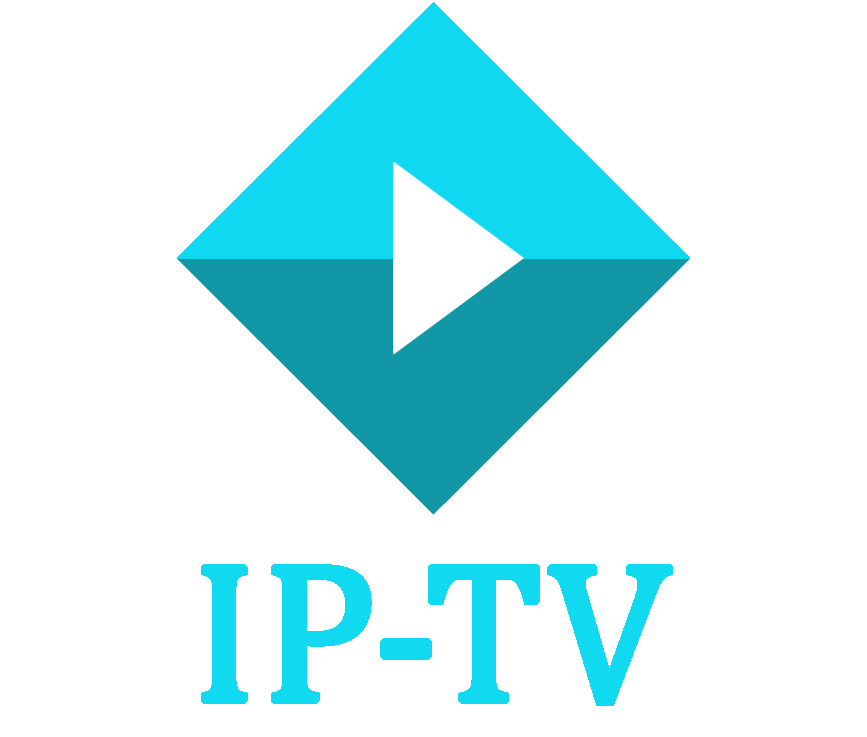
<style>
.page{position:relative;width:867px;height:737px;background:#ffffff}
.page>*{position:absolute;margin:0}
.t1{font:200px "CambriaMath";color:#11d9f0;font-weight:bold}
</style>
<div class="page">
<p class="t1" style="left:201px;top:564px;width:472px;height:142px">IP-TV</p>
</div>
